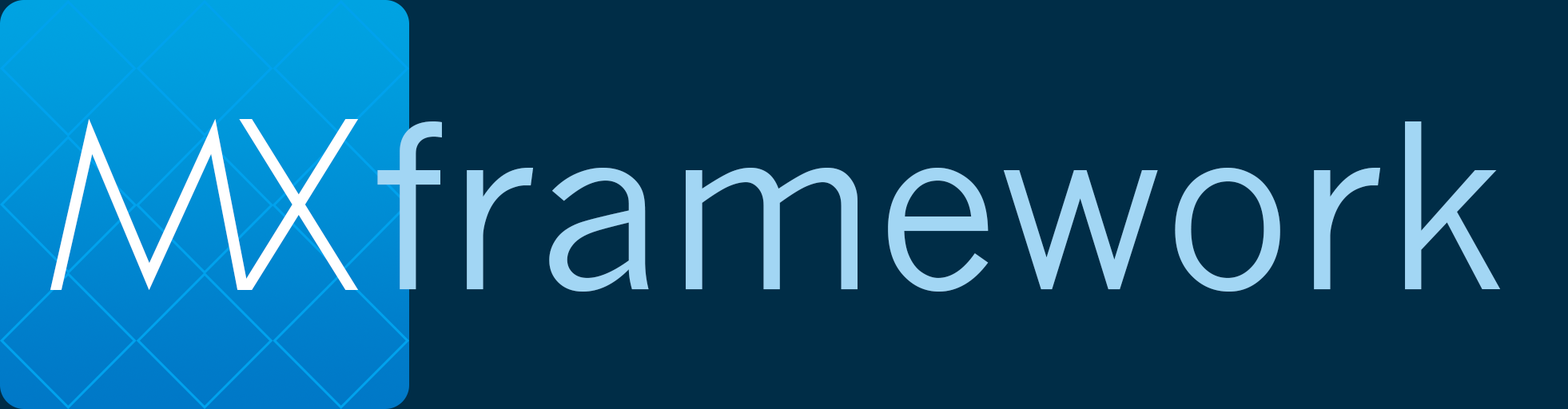
<style>
.page{position:relative;width:1568px;height:409px;background:#002d47}
.page>*{position:absolute;margin:0}
.t1{font:244.8px "phantom-ultralight";color:#ffffff}
.t2{font:225.8px "NewsGothicMT";color:#a2d6f4}
</style>
<div class="page">
<p class="t1" style="left:50px;top:119px;width:199px;height:171px">m</p>
<p class="t1" style="left:239px;top:119px;width:119px;height:171px">x</p>
<p class="t2" style="left:377px;top:121px;width:1124px;height:171px">framework</p>
</div>
